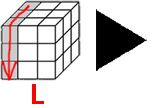
<style>
.page{position:relative;width:162px;height:108px;background:#ffffff}
.page>*{position:absolute;margin:0}
.t1{font:27px "MyriadPro-Regular";color:#ff0000;font-weight:bold}
</style>
<div class="page">
<p class="t1" style="left:32px;top:84px;width:12px;height:20px">L</p>
</div>
